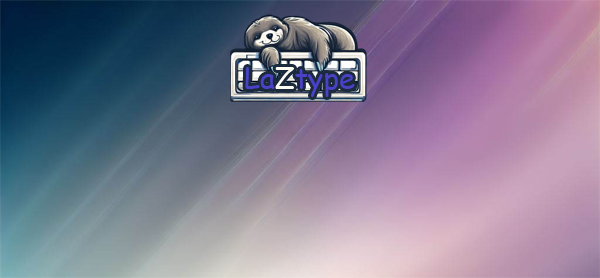
<style>
.page{position:relative;width:600px;height:278px}
.page>*{position:absolute;margin:0}
.t1{font:28.9px "ComicSansMS";color:#4a41c7}
.t2{font:28.9px "ComicSansMS";color:#fdfaf1}
</style>
<div class="page">
<p class="t1" style="left:245px;top:67px;width:110px;height:30px">La<span class="t2">Z</span>type</p>
</div>
